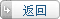
<style>
.page{position:relative;width:60px;height:19px}
.page>*{position:absolute;margin:0}
.t1{font:12px "SimSun";color:#1d5784}
</style>
<div class="page">
<p class="t1" style="left:23px;top:5px;width:23px;height:11px">返回</p>
</div>
